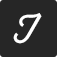
<style>
.page{position:relative;width:57px;height:57px;background:#262626}
.page>*{position:absolute;margin:0}
.t1{font:36px "Wisdom-Script";color:#ffffff}
</style>
<div class="page">
<p class="t1" style="left:13px;top:13px;width:29px;height:31px">T</p>
</div>
